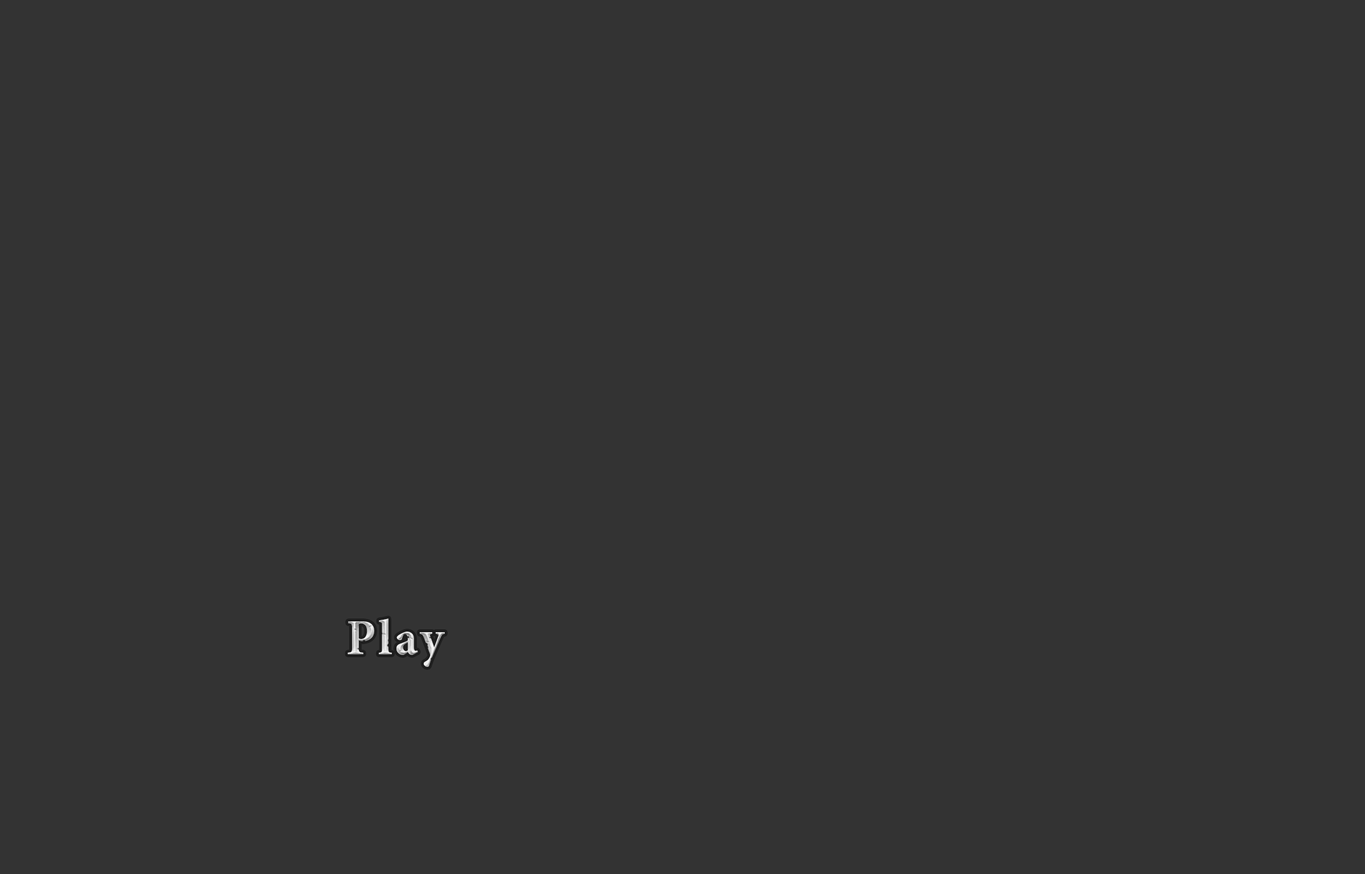
<style>
.page{position:relative;width:1365px;height:874px;background:#333333}
.page>*{position:absolute;margin:0}
.t1{font:50.6px "MinionPro-Bold";letter-spacing:0.05em}
</style>
<div class="page">
<p class="t1" style="left:348px;top:618px;width:97px;height:49px">Play</p>
</div>
